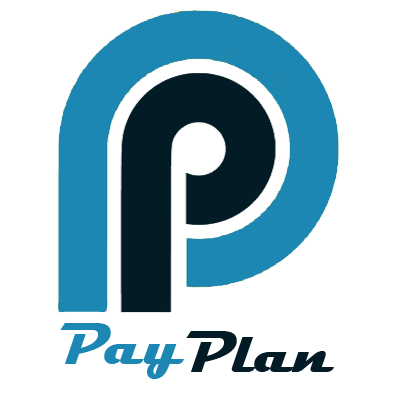
<style>
.page{position:relative;width:394px;height:394px;background:#ffffff}
.page>*{position:absolute;margin:0}
.t1{font:60px "Magneto-Bold";color:#1c87b2}
.t2{font:60px "Magneto-Bold";color:#031b25}
</style>
<div class="page">
<p class="t1" style="left:60px;top:323px;width:124px;height:56px">Pay</p>
<p class="t2" style="left:186px;top:331px;width:148px;height:41px">Plan</p>
</div>
